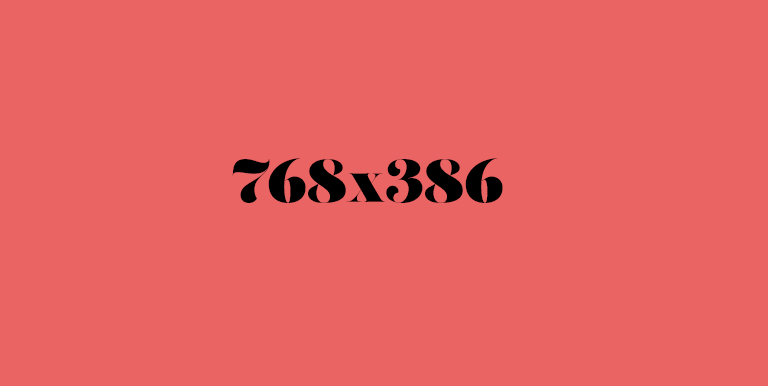
<style>
.page{position:relative;width:768px;height:386px;background:#ea6464}
.page>*{position:absolute;margin:0}
.t1{font:60px "Salome-Fine";color:#000000}
</style>
<div class="page">
<p class="t1" style="left:232px;top:158px;width:271px;height:45px">768x386</p>
</div>
